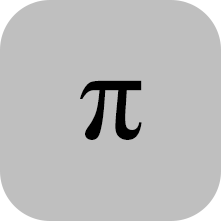
<style>
.page{position:relative;width:221px;height:221px;background:#bfbfbf}
.page>*{position:absolute;margin:0}
.t1{font:127.8px "TimesNewRomanPSMT";color:#000000}
</style>
<div class="page">
<p class="t1" style="left:80px;top:80px;width:62px;height:60px">π</p>
</div>
